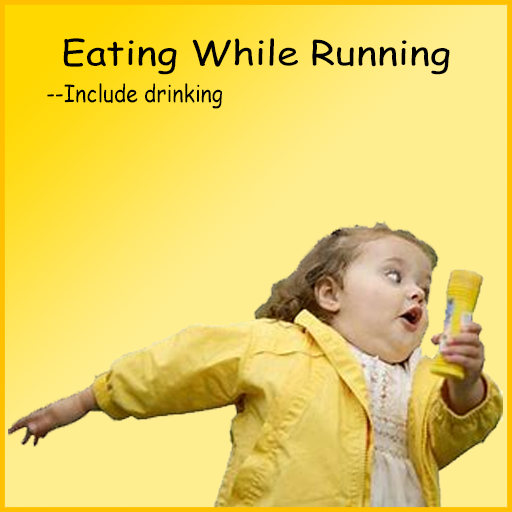
<style>
.page{position:relative;width:512px;height:512px;background:#ffee90}
.page>*{position:absolute;margin:0}
.t1{font:34px "ComicSansMS";color:#000000;scale:1.17 1}
.t2{font:24px "ComicSansMS";color:#000000;scale:0.88 1}
</style>
<div class="page">
<p class="t1" style="left:63px;top:38px;width:387px;height:37px">Eating While Running</p>
<p class="t2" style="left:47px;top:83px;width:175px;height:26px">--Include drinking</p>
</div>
